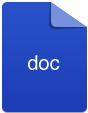
<style>
.page{position:relative;width:88px;height:113px}
.page>*{position:absolute;margin:0}
.t1{font:20px "Helvetica";color:#ffffff}
</style>
<div class="page">
<p class="t1" style="left:28px;top:55px;width:32px;height:15px">doc</p>
</div>
